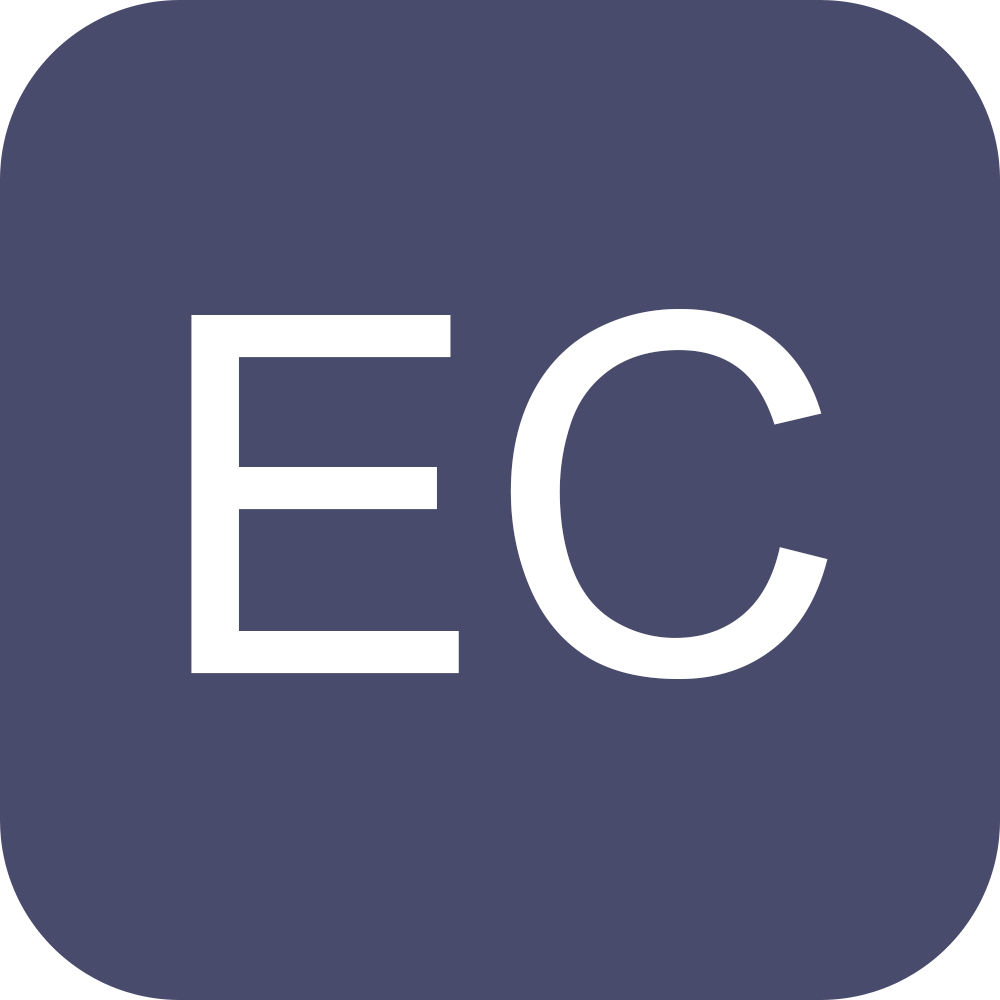
<style>
.page{position:relative;width:1000px;height:1000px;background:#494b6c}
.page>*{position:absolute;margin:0}
.t1{font:500px "ArialMT";color:#ffffff}
</style>
<div class="page">
<p class="t1" style="left:191px;top:309px;width:637px;height:370px">EC</p>
</div>
